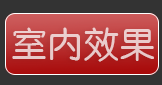
<style>
.page{position:relative;width:162px;height:85px;background:#333333}
.page>*{position:absolute;margin:0}
.t1{font:35.9px "HYe3gj";color:#eacccc}
</style>
<div class="page">
<p class="t1" style="left:12px;top:27px;width:142px;height:35px">室内效果</p>
</div>
